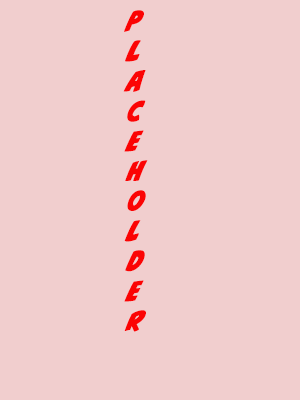
<style>
.page{position:relative;width:300px;height:400px;background:#f1cece}
.page>*{position:absolute;margin:0}
.t1{font:25px "CCBiffBamBoom";letter-spacing:0.025em;color:#fb0404;font-weight:bold}
</style>
<div class="page">
<p class="t1" style="left:123px;top:10px;width:25px;height:322px">P<br>L<br>a<br>c<br>e<br>h<br>o<br>l<br>d<br>e<br>r</p>
</div>
